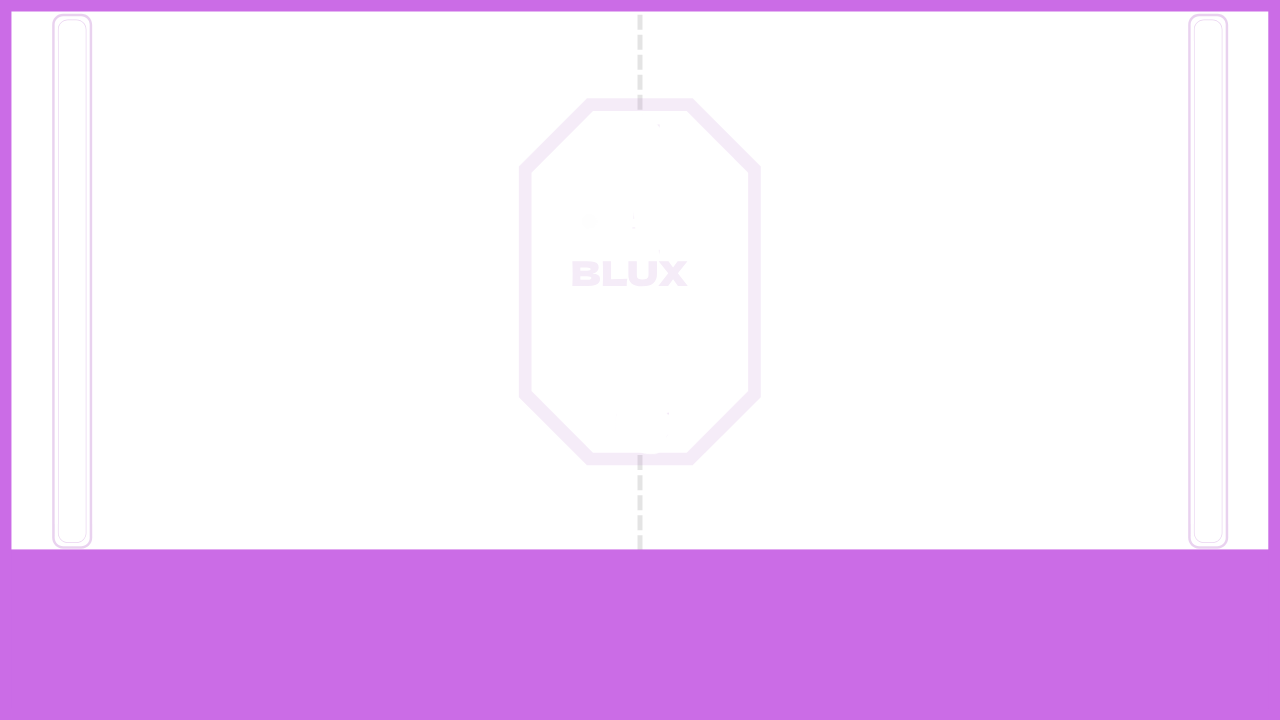
<style>
.page{position:relative;width:1280px;height:720px;background:#ffffff}
.page>*{position:absolute;margin:0}
.t1{font:34px "DelaGothicOne-Regular";color:#f5ecf8}
</style>
<div class="page">
<p class="t1" style="left:572px;top:261px;width:116px;height:26px">BLUX</p>
</div>
